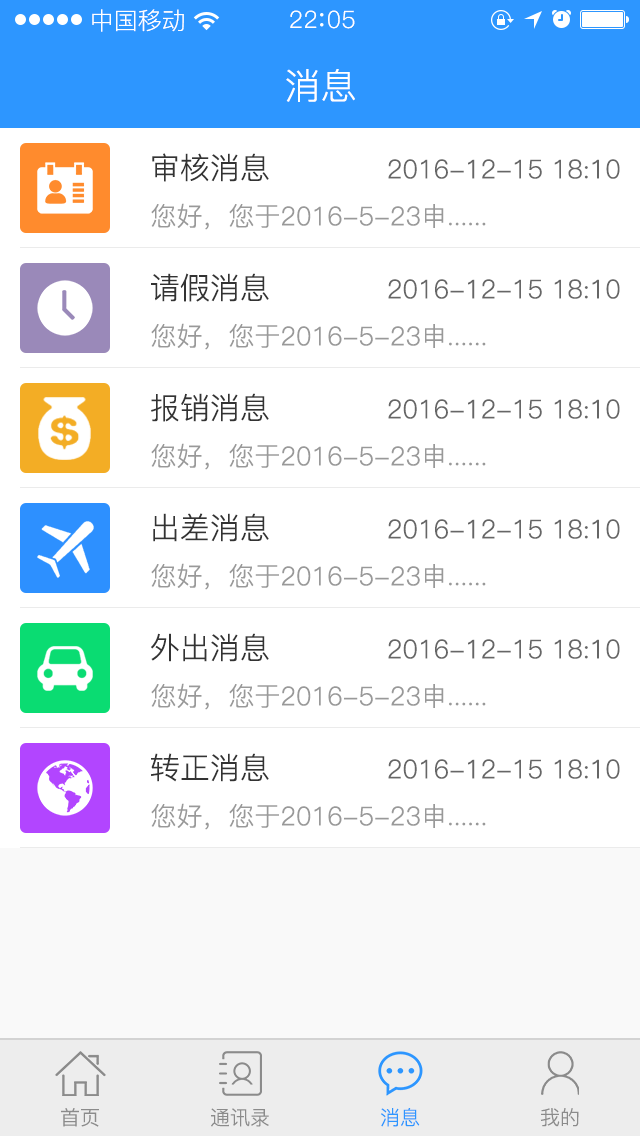
<style>
.page{position:relative;width:640px;height:1136px;background:#ffffff}
.page>*{position:absolute;margin:0}
.t1{font:24px "PingFang-SC-Regular";color:#ffffff}
.t2{font:24px "PingFang-SC-Regular";letter-spacing:0.03em;color:#ffffff}
.t3{font:36px "PingFang-SC-Regular";color:#ffffff}
.t4{font:30px "PingFang-SC-Regular";color:#333333}
.t5{font:26px "PingFang-SC-Regular";color:#666666}
.t6{font:26px "PingFang-SC-Regular";color:#999999}
.t7{font:20px "PingFang-SC-Regular";color:#8b8b8b}
.t8{font:20px "PingFang-SC-Regular";color:#2d96ff}
</style>
<div class="page">
<p class="t1" style="left:92px;top:9px;width:92px;height:23px">中国移动</p>
<p class="t2" style="left:290px;top:10px;width:65px;height:19px">22 05</p>
<p class="t3" style="left:286px;top:69px;width:69px;height:33px">消息</p>
<p class="t4" style="left:152px;top:153px;width:117px;height:29px">审核消息</p>
<p class="t5" style="left:388px;top:159px;width:232px;height:20px">2016-12-15 18:10</p>
<p class="t6" style="left:151px;top:203px;width:335px;height:27px">您好，您于2016-5-23申......</p>
<p class="t4" style="left:151px;top:273px;width:118px;height:29px">请假消息</p>
<p class="t5" style="left:388px;top:279px;width:232px;height:20px">2016-12-15 18:10</p>
<p class="t6" style="left:151px;top:323px;width:335px;height:27px">您好，您于2016-5-23申......</p>
<p class="t4" style="left:151px;top:393px;width:118px;height:29px">报销消息</p>
<p class="t5" style="left:388px;top:399px;width:232px;height:20px">2016-12-15 18:10</p>
<p class="t6" style="left:151px;top:443px;width:335px;height:27px">您好，您于2016-5-23申......</p>
<p class="t4" style="left:153px;top:513px;width:116px;height:29px">出差消息</p>
<p class="t5" style="left:388px;top:519px;width:232px;height:20px">2016-12-15 18:10</p>
<p class="t6" style="left:151px;top:563px;width:335px;height:27px">您好，您于2016-5-23申......</p>
<p class="t4" style="left:151px;top:633px;width:118px;height:29px">外出消息</p>
<p class="t5" style="left:388px;top:639px;width:232px;height:20px">2016-12-15 18:10</p>
<p class="t6" style="left:151px;top:683px;width:335px;height:27px">您好，您于2016-5-23申......</p>
<p class="t4" style="left:151px;top:753px;width:118px;height:29px">转正消息</p>
<p class="t5" style="left:388px;top:759px;width:232px;height:20px">2016-12-15 18:10</p>
<p class="t6" style="left:151px;top:803px;width:335px;height:27px">您好，您于2016-5-23申......</p>
<p class="t7" style="left:61px;top:1108px;width:38px;height:19px">首页</p>
<p class="t7" style="left:211px;top:1108px;width:58px;height:19px">通讯录</p>
<p class="t8" style="left:381px;top:1108px;width:39px;height:19px">消息</p>
<p class="t7" style="left:540px;top:1108px;width:39px;height:19px">我的</p>
</div>
